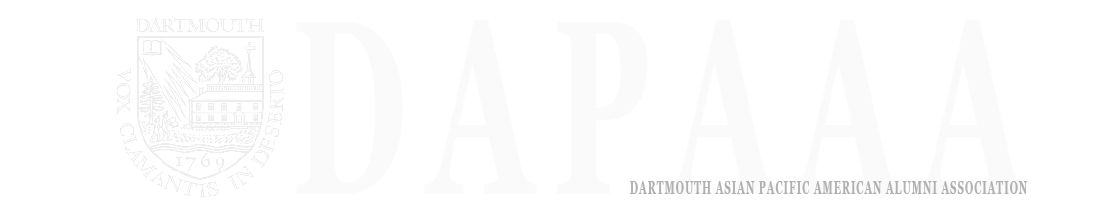
<style>
.page{position:relative;width:1108px;height:212px;background:#ffffff}
.page>*{position:absolute;margin:0}
.t1{font:247.5px "Georgia-Bold";letter-spacing:0.15em;color:#f9faf9;scale:0.56 1}
.t2{font:18px "Georgia-Bold";letter-spacing:0.1em;color:#b1b0b0;scale:0.56 1}
</style>
<div class="page">
<p class="t1" style="left:296px;top:19px;width:732px;height:175px">DAPAAA</p>
<p class="t2" style="left:630px;top:181px;width:398px;height:13px">DARTMOUTH ASIAN PACIFIC AMERICAN ALUMNI ASSOCIATION</p>
</div>
